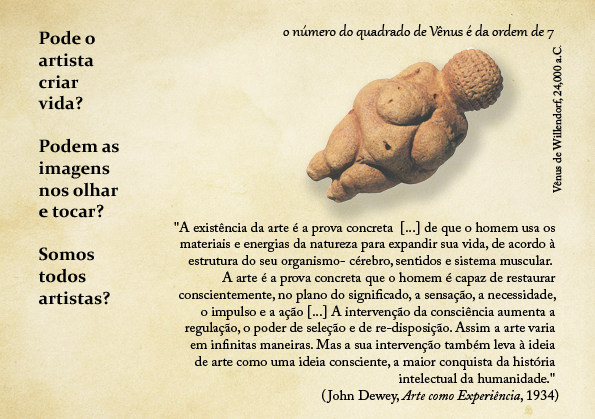
<style>
.page{position:relative;width:595px;height:419px}
.page>*{position:absolute;margin:0}
.t1{font:18px "Constantia-Bold";color:#000000}
.t2{font:18px "Gabriola";color:#000000}
.t3{font:11px "ACaslonPro-Regular";color:#000000}
.t4{font:7.1px "ACaslonPro-Regular";color:#000000}
.t5{font:14px "ACaslonPro-Regular";color:#000000}
.t6{font:14px "ACaslonPro-Italic";color:#000000}
</style>
<div class="page">
<p class="t1" style="left:38px;top:30px;width:81px;height:275px">Pode o <br>artista <br>criar<br>vida?<br><br>Podem as<br>imagens <br>nos olhar <br>e tocar?<br><br>Somos <br>todos<br>artistas?</p>
<p class="t2" style="left:283px;top:24px;width:271px;height:16px">o número do quadrado de Vênus é da ordem de 7</p>
<p class="t3" style="left:552px;top:45px;width:12px;height:148px;rotate:-90deg">Vênus de Willendorf, 24,000 a.C<span class="t4">.</span></p>
<p class="t5" style="left:174px;top:221px;width:385px;height:183px;text-align:right">"A existência da arte é a prova concreta  [...] de que o homem usa os <br>materiais e energias da natureza para expandir sua vida, de acordo à <br>estrutura do seu organismo- cérebro, sentidos e sistema muscular.  <br>A arte é a prova concreta que o homem é capaz de restaurar <br>conscientemente, no plano do significado, a sensação, a necessidade, <br>o impulso e a ação [...] A intervenção da consciência aumenta a <br>regulação, o poder de seleção e de re-disposição. Assim a arte varia <br>em infinitas maneiras. Mas a sua intervenção também leva à ideia <br>de arte como uma ideia consciente, a maior conquista da história <br>intelectual da humanidade." <br>(John Dewey, <span class="t6">Arte como Experiência</span>, 1934)</p>
</div>
